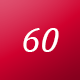
<style>
.page{position:relative;width:80px;height:80px}
.page>*{position:absolute;margin:0}
.t1{font:36px "Cambria-Italic";color:#ffffff}
</style>
<div class="page">
<p class="t1" style="left:23px;top:28px;width:36px;height:24px">60</p>
</div>
